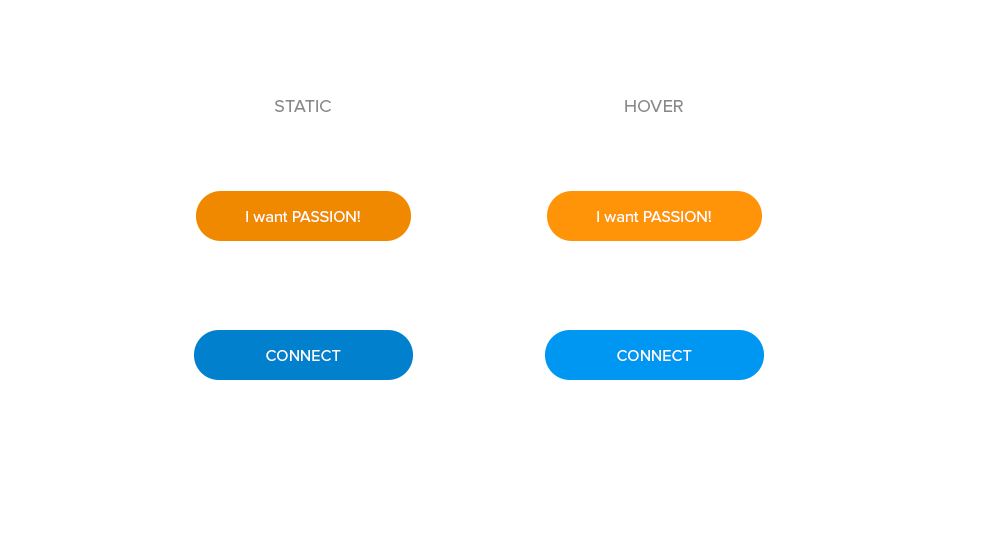
<style>
.page{position:relative;width:1000px;height:539px;background:#ffffff}
.page>*{position:absolute;margin:0}
.t1{font:18px "ProximaNova-Regular";color:#898989;text-transform:uppercase}
.t2{font:16px "ProximaNova-Regular";letter-spacing:0.005em;color:#ffffff}
.t3{font:16px "ProximaNova-Regular";letter-spacing:0.005em;color:#ffffff;text-transform:uppercase}
</style>
<div class="page">
<p class="t1" style="left:275px;top:100px;width:56px;height:12px">Static</p>
<p class="t1" style="left:625px;top:100px;width:58px;height:12px">HOVER</p>
<p class="t2" style="left:246px;top:211px;width:114px;height:11px">I want PASSION!</p>
<p class="t2" style="left:597px;top:211px;width:114px;height:11px">I want PASSION!</p>
<p class="t3" style="left:266px;top:350px;width:75px;height:11px">Connect</p>
<p class="t3" style="left:617px;top:350px;width:75px;height:11px">Connect</p>
</div>
